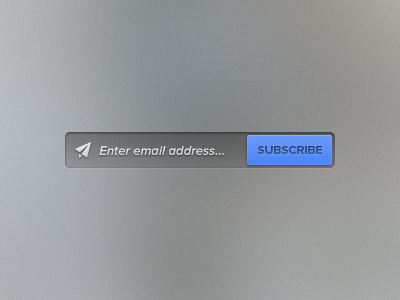
<style>
.page{position:relative;width:400px;height:300px}
.page>*{position:absolute;margin:0}
.t1{font:13px "ProximaNova-SemiboldIt";color:#dddedf}
.t2{font:12px "ProximaNova-Bold";color:#2f4d86}
</style>
<div class="page">
<p class="t1" style="left:99px;top:146px;width:125px;height:9px">Enter email address…</p>
<p class="t2" style="left:257px;top:146px;width:65px;height:8px">SUBSCRIBE</p>
</div>
